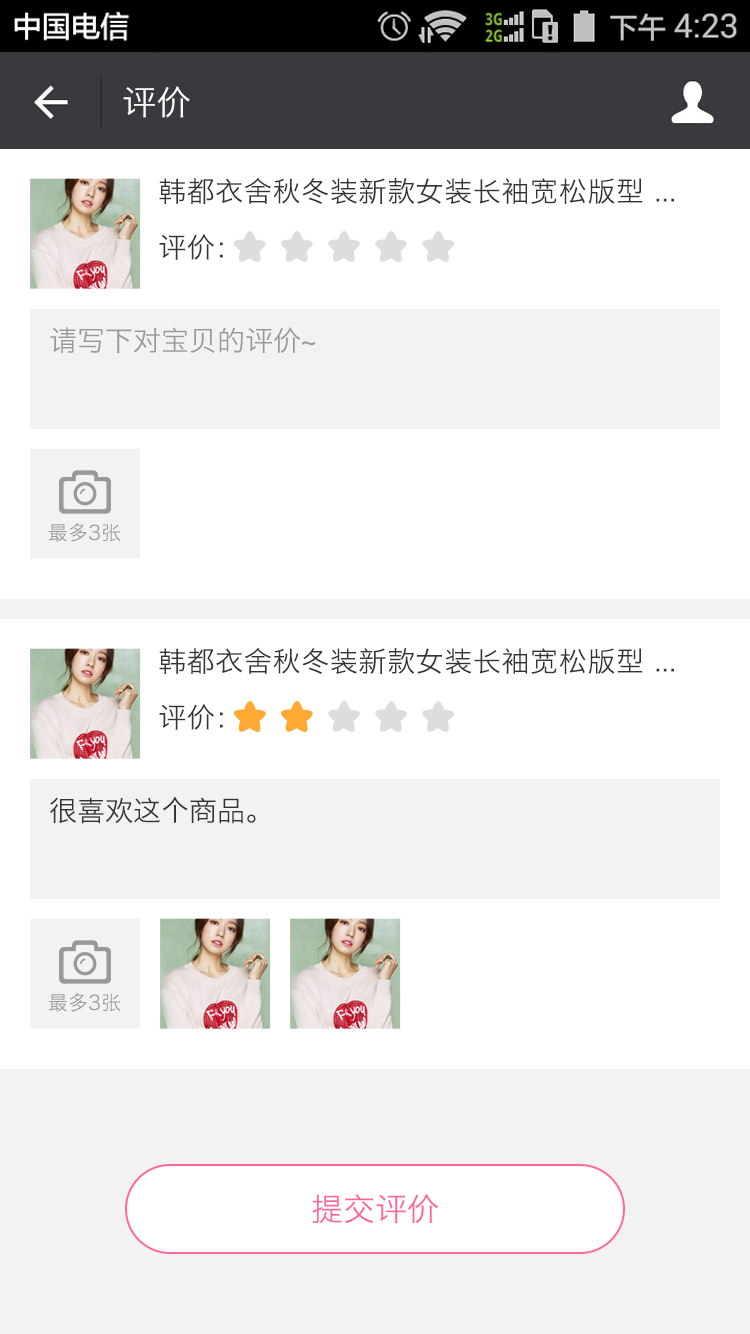
<style>
.page{position:relative;width:750px;height:1334px;background:#ffffff}
.page>*{position:absolute;margin:0}
.t1{font:34px "HiraginoSansGB-W3";letter-spacing:0.022em;color:#ffffff}
.t2{font:28px "HiraginoSansGB-W3";letter-spacing:0.022em;color:#333333}
.t3{font:28px "HiraginoSansGB-W3";color:#999999}
.t4{font:20px "HiraginoSansGB-W3";color:#999999}
.t5{font:28px "HiraginoSansGB-W3";color:#333333}
.t6{font:32px "HiraginoSansGB-W3";color:#ff6699}
</style>
<div class="page">
<p class="t1" style="left:123px;top:86px;width:67px;height:32px">评价</p>
<p class="t2" style="left:159px;top:177px;width:515px;height:27px">韩都衣舍秋冬装新款女装长袖宽松版型 ...</p>
<p class="t2" style="left:159px;top:234px;width:64px;height:26px">评价：</p>
<p class="t3" style="left:50px;top:327px;width:266px;height:26px">请写下对宝贝的评价~</p>
<p class="t4" style="left:49px;top:523px;width:72px;height:19px">最多3张</p>
<p class="t2" style="left:159px;top:647px;width:515px;height:27px">韩都衣舍秋冬装新款女装长袖宽松版型 ...</p>
<p class="t2" style="left:159px;top:704px;width:64px;height:26px">评价：</p>
<p class="t5" style="left:50px;top:797px;width:206px;height:27px">很喜欢这个商品。</p>
<p class="t4" style="left:49px;top:993px;width:72px;height:19px">最多3张</p>
<p class="t6" style="left:312px;top:1194px;width:126px;height:30px">提交评价</p>
</div>
